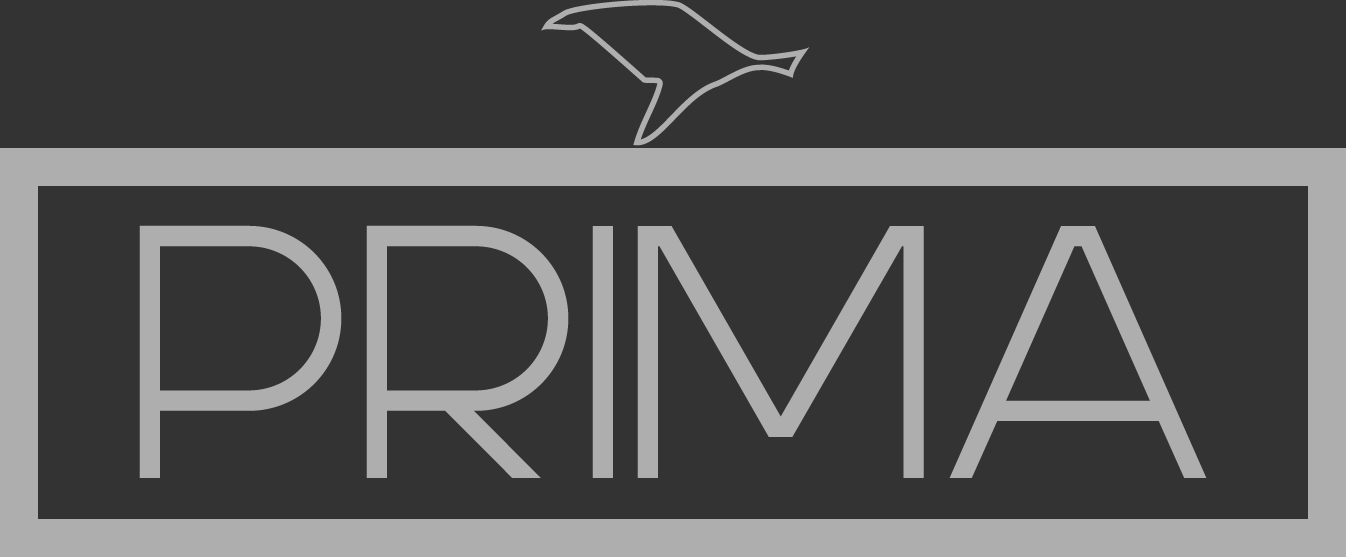
<style>
.page{position:relative;width:1346px;height:557px;background:#333333}
.page>*{position:absolute;margin:0}
.t1{font:336px "Aspergit-Bold";letter-spacing:-0.025em;color:#aeaeae}
</style>
<div class="page">
<p class="t1" style="left:139px;top:225px;width:1068px;height:253px">PRIMA</p>
</div>
